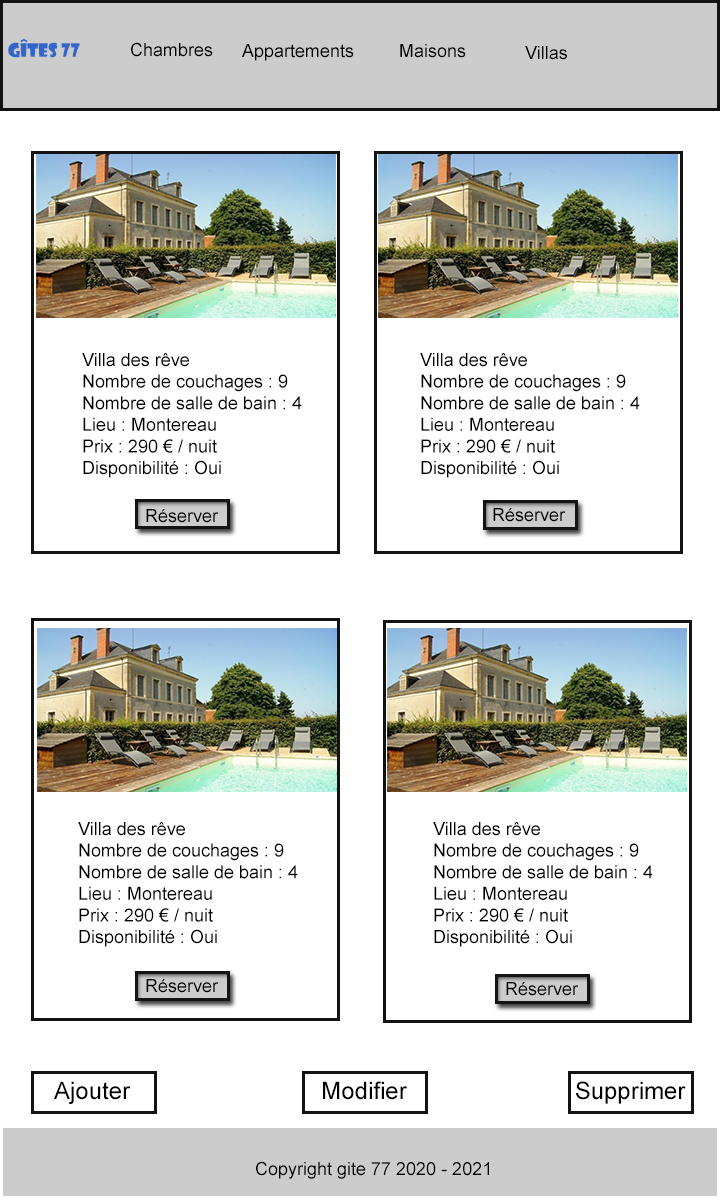
<style>
.page{position:relative;width:720px;height:1200px;background:#ffffff}
.page>*{position:absolute;margin:0}
.t1{font:18px "ShowcardGothic-Reg";color:#3366cc}
.t2{font:18px "ArialMT";color:#000000}
.t3{font:24px "ArialMT";color:#000000}
</style>
<div class="page">
<p class="t1" style="left:8px;top:38px;width:72px;height:20px">Gîtes 77</p>
<p class="t2" style="left:131px;top:42px;width:82px;height:15px">Chambres</p>
<p class="t2" style="left:242px;top:44px;width:112px;height:17px">Appartements</p>
<p class="t2" style="left:400px;top:44px;width:66px;height:14px">Maisons</p>
<p class="t2" style="left:525px;top:46px;width:42px;height:14px">Villas</p>
<p class="t2" style="left:82px;top:353px;width:220px;height:125px">Villa des rêve<br>Nombre de couchages : 9<br>Nombre de salle de bain : 4<br>Lieu : Montereau<br>Prix : 290 € / nuit<br>Disponibilité : Oui</p>
<p class="t2" style="left:420px;top:353px;width:220px;height:125px">Villa des rêve<br>Nombre de couchages : 9<br>Nombre de salle de bain : 4<br>Lieu : Montereau<br>Prix : 290 € / nuit<br>Disponibilité : Oui</p>
<p class="t2" style="left:146px;top:509px;width:73px;height:14px">Réserver</p>
<p class="t2" style="left:493px;top:508px;width:73px;height:14px">Réserver</p>
<p class="t2" style="left:78px;top:822px;width:220px;height:125px">Villa des rêve<br>Nombre de couchages : 9<br>Nombre de salle de bain : 4<br>Lieu : Montereau<br>Prix : 290 € / nuit<br>Disponibilité : Oui</p>
<p class="t2" style="left:433px;top:822px;width:220px;height:125px">Villa des rêve<br>Nombre de couchages : 9<br>Nombre de salle de bain : 4<br>Lieu : Montereau<br>Prix : 290 € / nuit<br>Disponibilité : Oui</p>
<p class="t2" style="left:146px;top:979px;width:73px;height:14px">Réserver</p>
<p class="t2" style="left:506px;top:982px;width:73px;height:14px">Réserver</p>
<p class="t3" style="left:54px;top:1081px;width:77px;height:23px">Ajouter</p>
<p class="t3" style="left:323px;top:1081px;width:84px;height:19px">Modifier</p>
<p class="t3" style="left:576px;top:1081px;width:110px;height:23px">Supprimer</p>
<p class="t2" style="left:256px;top:1161px;width:233px;height:18px">Copyright gite 77 2020 - 2021</p>
</div>
